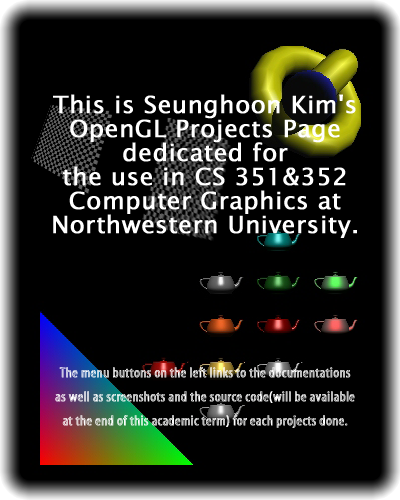
<style>
.page{position:relative;width:400px;height:500px;background:#000000}
.page>*{position:absolute;margin:0}
.t1{font:14px/24px "MyriadStd-Sketch";letter-spacing:0.01em;color:#ffffff;font-weight:bold}
.t2{font:24px/24px "CountryBlueprint";letter-spacing:0.01em;color:#ffffff;font-weight:bold}
.t3{font:24px/24px "LucidaSansUnicode";letter-spacing:0.01em;color:#ffffff;font-weight:bold}
</style>
<div class="page">
<p class="t1" style="left:53px;top:94px;width:304px;height:334px;text-align:center"><span class="t2"><br><br><br></span><span class="t3">This is Seunghoon Kim's OpenGL Projects Page<br>dedicated for<br>the use in CS 351&amp;352 <br>Computer Graphics at Northwestern University.<br><br><br><br><br><br></span>The menu buttons on the left links to the documentations <br>as well as screenshots and the source code(will be available <br>at the end of this academic term) for each projects done.</p>
</div>
